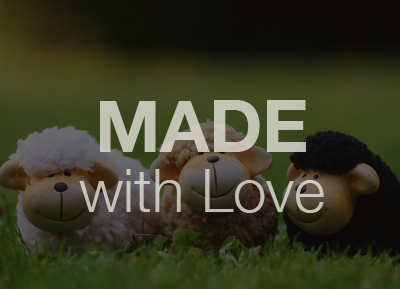
<style>
.page{position:relative;width:400px;height:289px}
.page>*{position:absolute;margin:0}
.t1{font:60px/60px "HelveticaNeue-Light";color:#c2c3b3}
.t2{font:72px/72px "HelveticaNeue-Bold";color:#c2c3b3}
</style>
<div class="page">
<p class="t1" style="left:79px;top:100px;width:245px;height:113px;text-align:center"><span class="t2">MADE<br></span>with Love</p>
</div>
